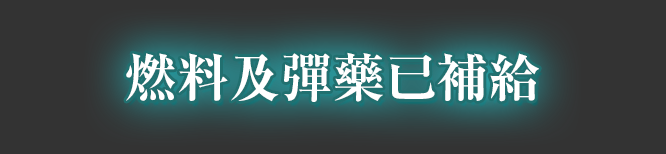
<style>
.page{position:relative;width:666px;height:154px;background:#333333}
.page>*{position:absolute;margin:0}
.t1{font:52px "RyuminPro-ExBold";color:#ffffff}
</style>
<div class="page">
<p class="t1" style="left:126px;top:52px;width:413px;height:50px">燃料及彈藥已補給</p>
</div>
